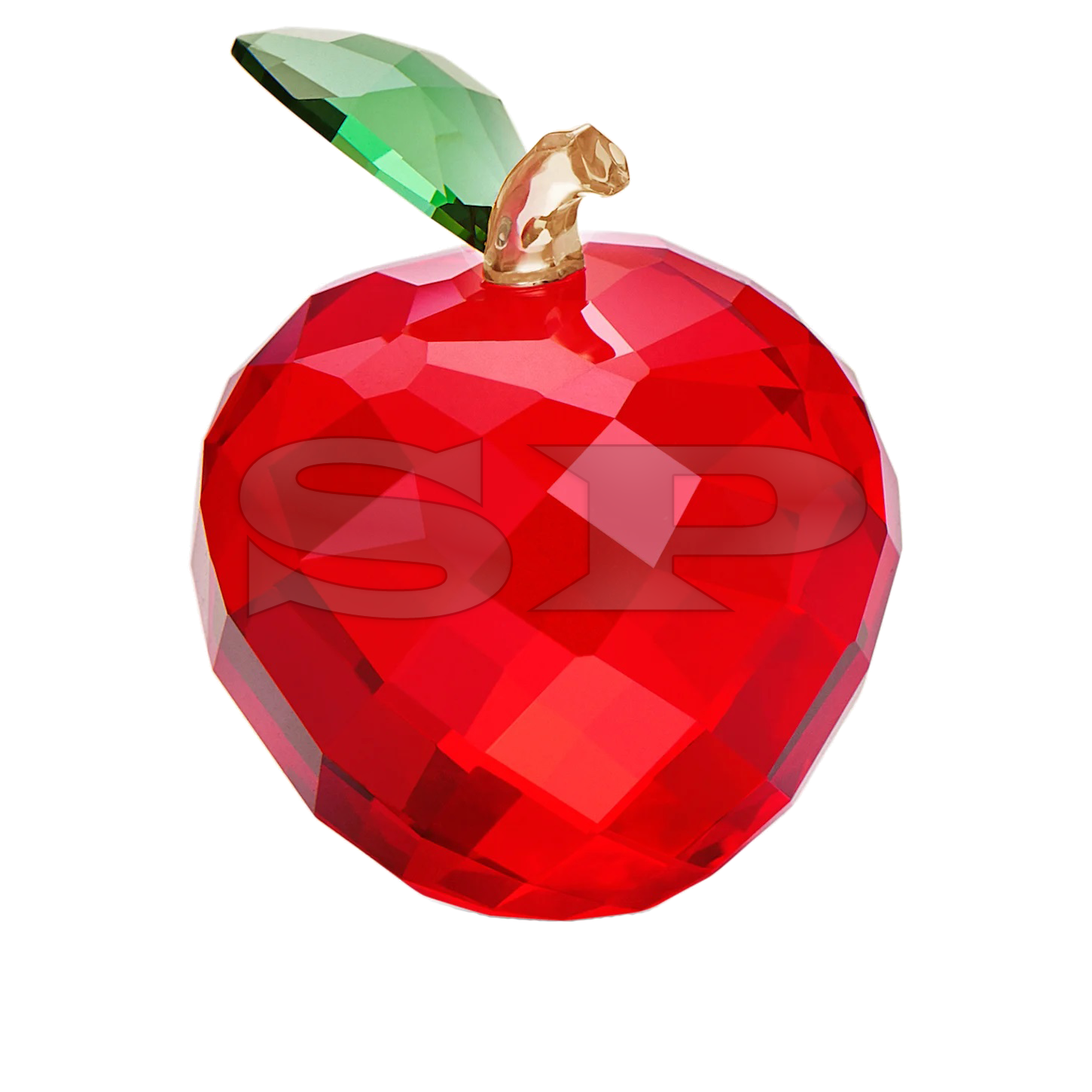
<style>
.page{position:relative;width:1092px;height:1092px;background:#ffffff}
.page>*{position:absolute;margin:0}
.t1{font:251px "LatinWide"}
</style>
<div class="page">
<p class="t1" style="left:237px;top:435px;width:631px;height:186px">SP</p>
</div>
